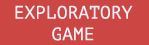
<style>
.page{position:relative;width:149px;height:45px;background:#cc4744}
.page>*{position:absolute;margin:0}
.t1{font:18px "PTMono-Regular";color:#f1f0f9}
</style>
<div class="page">
<p class="t1" style="left:15px;top:5px;width:118px;height:36px;text-align:center">EXPLORATORY<br>GAME</p>
</div>
